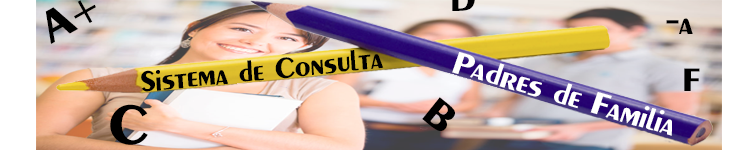
<style>
.page{position:relative;width:736px;height:150px}
.page>*{position:absolute;margin:0}
.t1{font:45.8px "Penultimate";color:#000000}
.t2{font:45.8px "MyriadPro-Regular";color:#000000}
.t3{font:33.3px "Penultimate";color:#000000}
.t4{font:30.3px "Penultimate";color:#000000}
.t5{font:32.1px "Penultimate";color:#ffffff}
.t6{font:41.7px "Penultimate";color:#000000}
.t7{font:58.3px "Penultimate";color:#000000}
</style>
<div class="page">
<p class="t1" style="left:45px;top:0px;width:51px;height:44px;rotate:-29deg">A<span class="t2">+</span></p>
<p class="t3" style="left:666px;top:18px;width:27px;height:16px">-a</p>
<p class="t4" style="left:141px;top:50px;width:243px;height:42px;rotate:-6deg">Sistema de Consulta</p>
<p class="t5" style="left:452px;top:52px;width:220px;height:84px;rotate:16deg">Padres de Familia</p>
<p class="t3" style="left:684px;top:68px;width:16px;height:23px">F</p>
<p class="t6" style="left:422px;top:97px;width:33px;height:34px;rotate:39deg">B</p>
<p class="t7" style="left:110px;top:104px;width:38px;height:41px">C</p>
</div>
